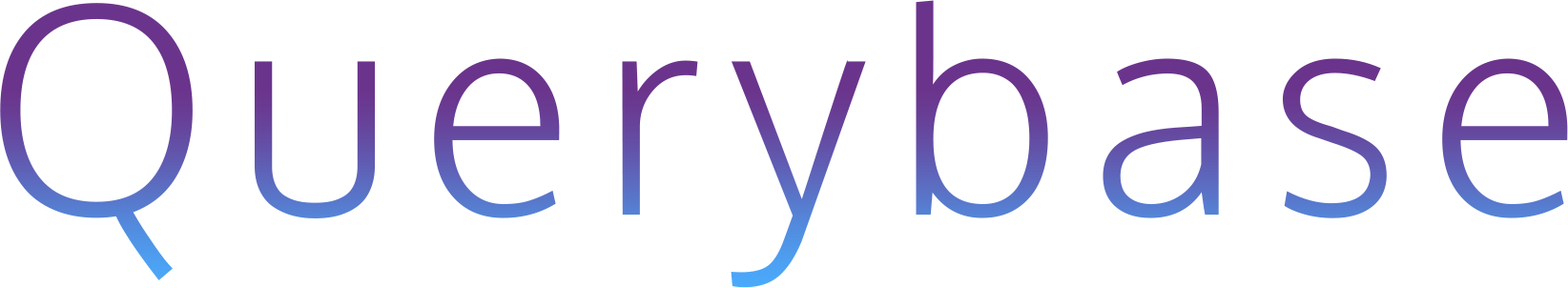
<style>
.page{position:relative;width:1568px;height:288px;background:#ffffff}
.page>*{position:absolute;margin:0}
.t1{font:286.1px "Oxygen-Light";letter-spacing:0.1em}
</style>
<div class="page">
<p class="t1" style="left:0px;top:0px;width:1568px;height:288px">Querybase</p>
</div>
